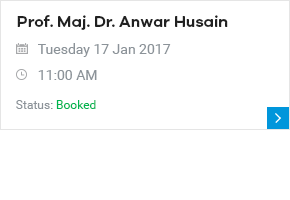
<style>
.page{position:relative;width:290px;height:200px;background:#ffffff}
.page>*{position:absolute;margin:0}
.t1{font:16px "GalanoGrotesque-SemiBold";color:#212121}
.t2{font:14px "Roboto-Regular";color:#8c9399}
.t3{font:12px "Roboto-Regular";color:#8c9399}
.t4{font:12px "Roboto-Regular";color:#00b550}
</style>
<div class="page">
<p class="t1" style="left:17px;top:15px;width:211px;height:15px">Prof. Maj. Dr. Anwar Husain</p>
<p class="t2" style="left:38px;top:43px;width:133px;height:14px">Tuesday 17 Jan 2017</p>
<p class="t2" style="left:38px;top:70px;width:59px;height:10px">11:00 AM</p>
<p class="t3" style="left:16px;top:100px;width:80px;height:9px">Status: <span class="t4">Booked</span></p>
</div>
